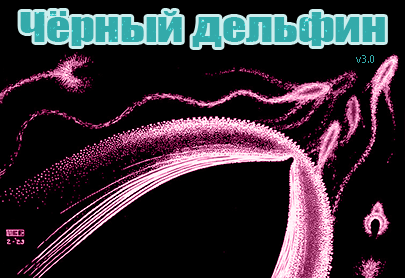
<style>
.page{position:relative;width:405px;height:278px;background:#000000}
.page>*{position:absolute;margin:0}
.t1{font:38px "Impact";color:#33aaaa;scale:1.25 1}
</style>
<div class="page">
<p class="t1" style="left:20px;top:11px;width:365px;height:36px">Чёрный дельфин</p>
</div>
